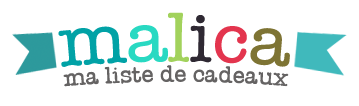
<style>
.page{position:relative;width:359px;height:106px;background:#ffffff}
.page>*{position:absolute;margin:0}
.t1{font:70px "AmericanTypewriter";color:#01a2a6}
.t2{font:70px "AmericanTypewriter";color:#29d9c2}
.t3{font:70px "AmericanTypewriter";color:#a2d25c}
.t4{font:70px "AmericanTypewriter";color:#2f2933}
.t5{font:70px "AmericanTypewriter";color:#e3354e}
.t6{font:70px "AmericanTypewriter";color:#7e7434}
.t7{font:23.6px "AmericanTypewriter";color:#656363}
</style>
<div class="page">
<p class="t1" style="left:58px;top:12px;width:232px;height:55px">m<span class="t2">a</span><span class="t3">l</span><span class="t4">i</span><span class="t5">c</span><span class="t6">a</span></p>
<p class="t7" style="left:63px;top:65px;width:226px;height:22px">ma liste de cadeaux</p>
</div>
